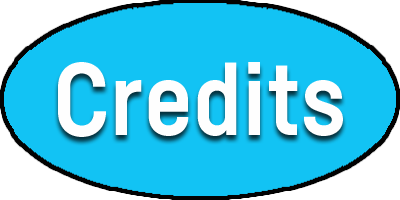
<style>
.page{position:relative;width:400px;height:200px;background:#12c3f4}
.page>*{position:absolute;margin:0}
.t1{font:100px "Fabrikat-Bold";letter-spacing:0.01em;color:#fefefe}
</style>
<div class="page">
<p class="t1" style="left:58px;top:62px;width:285px;height:75px">Credits</p>
</div>
